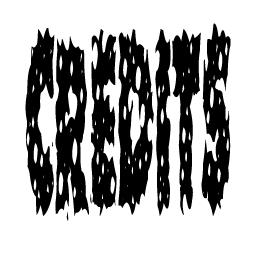
<style>
.page{position:relative;width:256px;height:256px;background:#ffffff}
.page>*{position:absolute;margin:0}
.t1{font:256px "Waterhle";color:#000000;scale:0.2 1}
</style>
<div class="page">
<p class="t1" style="left:25px;top:23px;width:206px;height:198px">CREDITS</p>
</div>
